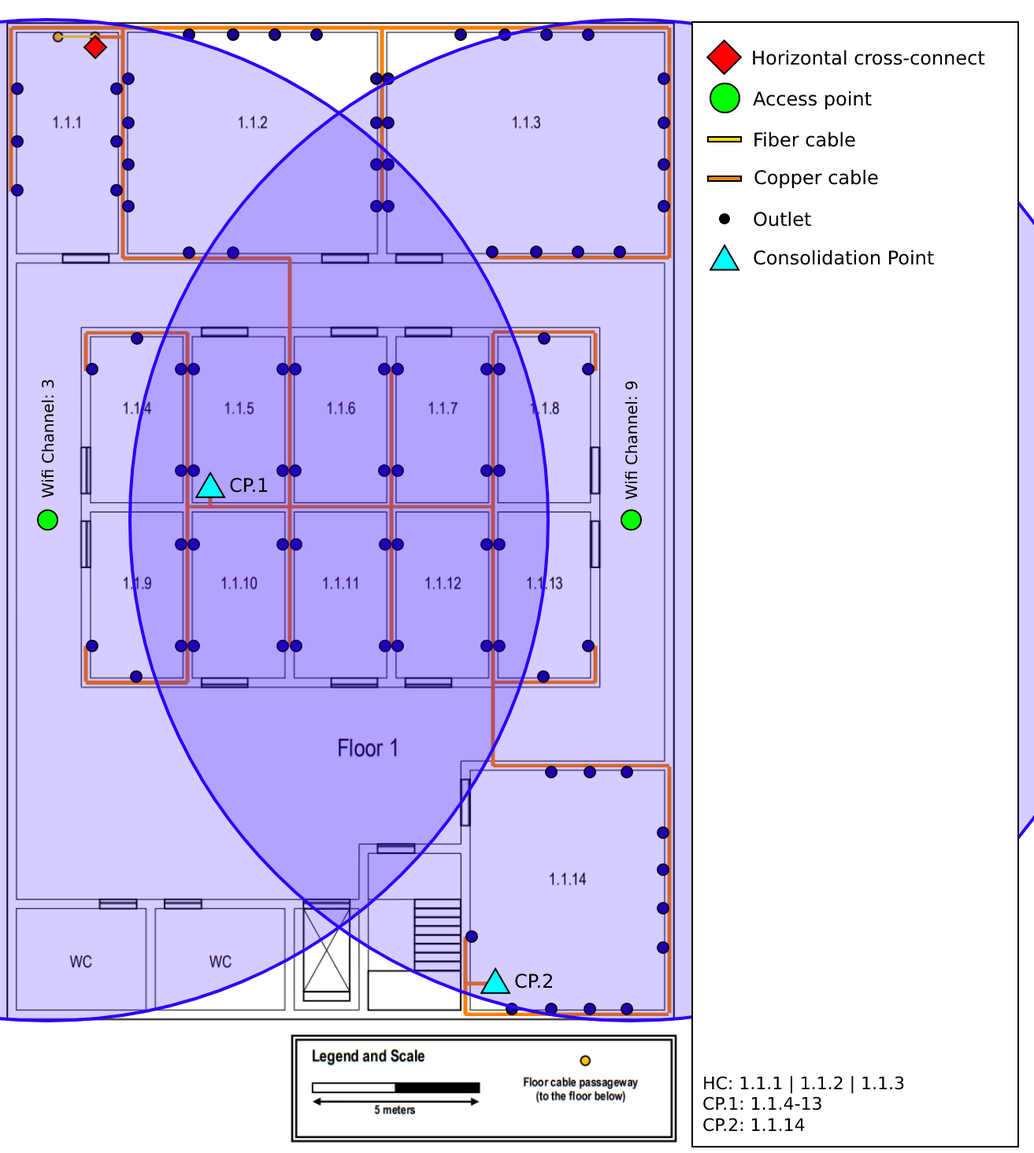
<style>
.page{position:relative;width:1034px;height:1153px;background:#ffffff}
.page>*{position:absolute;margin:0}
.t1{font:18.9px "DejaVuSans";color:#000000}
.t2{font:15.7px "DejaVuSans";color:#000000}
.t3{font:17.3px "DejaVuSans";color:#000000}
</style>
<div class="page">
<p class="t1" style="left:753px;top:50px;width:232px;height:15px">Horizontal cross-connect</p>
<p class="t1" style="left:753px;top:91px;width:119px;height:18px">Access point</p>
<p class="t1" style="left:754px;top:131px;width:101px;height:16px">Fiber cable</p>
<p class="t1" style="left:754px;top:169px;width:124px;height:19px">Copper cable</p>
<p class="t1" style="left:753px;top:211px;width:58px;height:16px">Outlet</p>
<p class="t1" style="left:753px;top:250px;width:181px;height:15px">Consolidation Point</p>
<p class="t2" style="left:41px;top:380px;width:13px;height:118px;rotate:-90deg">Wifi Channel: 3</p>
<p class="t2" style="left:624px;top:381px;width:14px;height:119px;rotate:-90deg">Wifi Channel: 9</p>
<p class="t1" style="left:230px;top:478px;width:38px;height:15px">CP.1</p>
<p class="t1" style="left:515px;top:974px;width:37px;height:15px">CP.2</p>
<p class="t3" style="left:703px;top:1076px;width:201px;height:56px">HC: 1.1.1 | 1.1.2 | 1.1.3<br>CP.1: 1.1.4-13<br>CP.2: 1.1.14</p>
</div>
